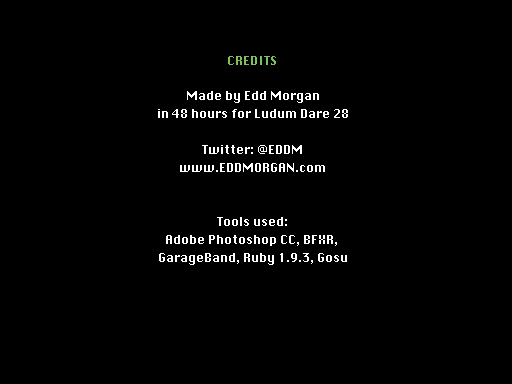
<style>
.page{position:relative;width:512px;height:384px;background:#000000}
.page>*{position:absolute;margin:0}
.t1{font:12px "Silom";color:#7dbf61}
.t2{font:12px/18px "Silom";color:#ffffff}
</style>
<div class="page">
<p class="t1" style="left:228px;top:56px;width:48px;height:9px">CREDITS</p>
<p class="t2" style="left:158px;top:91px;width:190px;height:174px;text-align:center">Made by Edd Morgan<br>in 48 hours for Ludum Dare 28<br><br>Twitter: @EDDM<br>www.EDDMORGAN.com<br><br><br>Tools used:<br>Adobe Photoshop CC, BFXR, <br>GarageBand, Ruby 1.9.3, Gosu</p>
</div>
